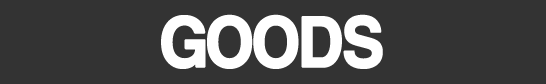
<style>
.page{position:relative;width:546px;height:84px;background:#333333}
.page>*{position:absolute;margin:0}
.t1{font:65.1px "H2gtrE";letter-spacing:-0.1em;color:#ffffff;font-weight:bold;scale:0.94 1}
</style>
<div class="page">
<p class="t1" style="left:161px;top:14px;width:222px;height:55px">GOODS</p>
</div>
